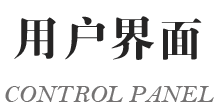
<style>
.page{position:relative;width:220px;height:110px;background:#ffffff}
.page>*{position:absolute;margin:0}
.t1{font:48px "FZDBSJW--GB1-0";color:#252424}
.t2{font:25px "BellMTItalic";color:#747373}
</style>
<div class="page">
<p class="t1" style="left:14px;top:16px;width:188px;height:44px">用户界面</p>
<p class="t2" style="left:5px;top:86px;width:209px;height:16px">CONTROL PANEL</p>
</div>
